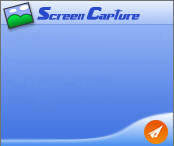
<style>
.page{position:relative;width:174px;height:146px}
.page>*{position:absolute;margin:0}
.t1{font:14px "-Xenogears";letter-spacing:-0.05em;color:#284bcd}
</style>
<div class="page">
<p class="t1" style="left:37px;top:7px;width:103px;height:13px">Screen Capture</p>
</div>
